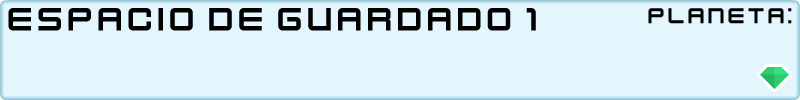
<style>
.page{position:relative;width:800px;height:100px;background:#e3f6fd}
.page>*{position:absolute;margin:0}
.t1{font:36px "KenVector-Future";color:#000000}
.t2{font:24px "KenVector-Future";color:#000000}
</style>
<div class="page">
<p class="t1" style="left:8px;top:8px;width:528px;height:23px">espacio de guardado 1</p>
<p class="t2" style="left:648px;top:8px;width:144px;height:16px">planeta:</p>
</div>
